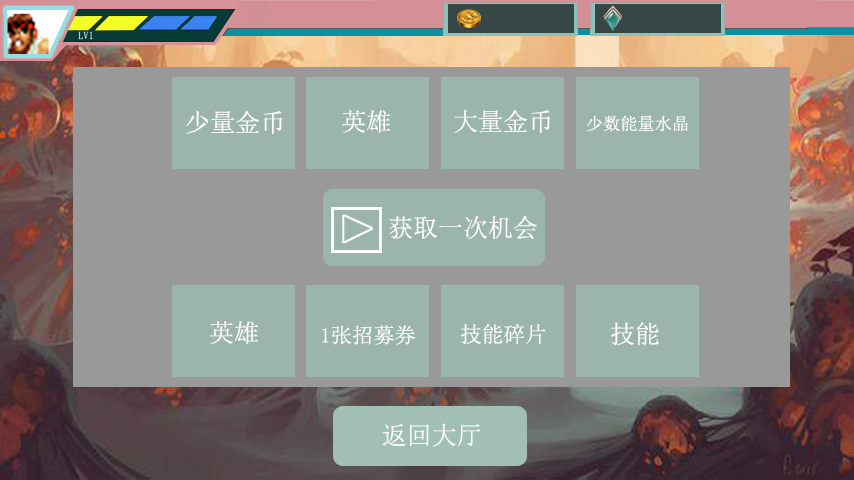
<style>
.page{position:relative;width:854px;height:480px;background:#999999}
.page>*{position:absolute;margin:0}
.t1{font:25px "SimSun";color:#ffffff}
.t2{font:17px "SimSun";color:#ffffff}
.t3{font:21px "SimSun";color:#ffffff}
.t4{font:22px "SimSun";color:#ffffff}
.t5{font:25.2px "SimSun";color:#ffffff}
</style>
<div class="page">
<p class="t1" style="left:186px;top:110px;width:97px;height:24px">少量金币</p>
<p class="t1" style="left:342px;top:110px;width:49px;height:23px">英雄</p>
<p class="t1" style="left:454px;top:109px;width:96px;height:25px">大量金币</p>
<p class="t2" style="left:586px;top:115px;width:102px;height:17px">少数能量水晶</p>
<p class="t1" style="left:389px;top:215px;width:148px;height:25px">获取一次机会</p>
<p class="t1" style="left:210px;top:321px;width:49px;height:23px">英雄</p>
<p class="t3" style="left:322px;top:325px;width:94px;height:20px">1张招募券</p>
<p class="t4" style="left:460px;top:323px;width:86px;height:22px">技能碎片</p>
<p class="t1" style="left:611px;top:322px;width:48px;height:24px">技能</p>
<p class="t5" style="left:382px;top:423px;width:99px;height:24px">返回大厅</p>
</div>
